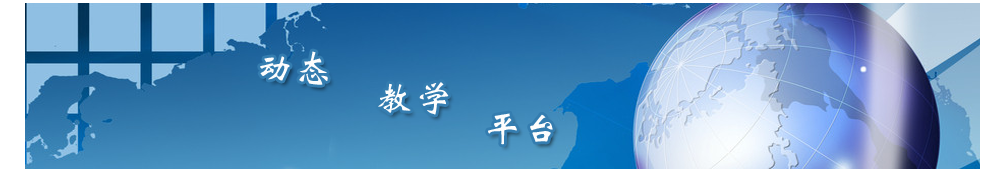
<style>
.page{position:relative;width:1003px;height:172px}
.page>*{position:absolute;margin:0}
.t1{font:36px/30px "CTWeiBeiSJ";letter-spacing:0.1em;color:#fdfdfd}
</style>
<div class="page">
<p class="t1" style="left:260px;top:51px;width:293px;height:94px">动态<br>          教学   <br>                   平台</p>
</div>
